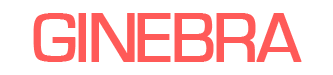
<style>
.page{position:relative;width:333px;height:75px;background:#ffffff}
.page>*{position:absolute;margin:0}
.t1{font:72px "EurostileRegular";letter-spacing:-0.05em;color:#ff5a58;text-transform:uppercase;font-weight:bold}
</style>
<div class="page">
<p class="t1" style="left:33px;top:13px;width:269px;height:49px">Ginebra</p>
</div>
